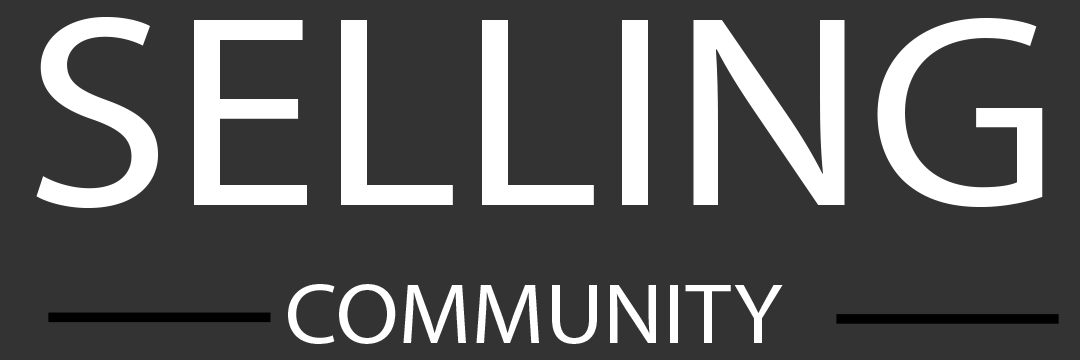
<style>
.page{position:relative;width:1080px;height:360px;background:#333333}
.page>*{position:absolute;margin:0}
.t1{font:273.8px "MyriadPro-Regular";color:#ffffff;scale:1.09 1}
.t2{font:85.7px "MyriadPro-Regular";color:#ffffff;scale:1.06 1}
</style>
<div class="page">
<p class="t1" style="left:36px;top:17px;width:1007px;height:192px">SELLING</p>
<p class="t2" style="left:288px;top:284px;width:495px;height:60px">COMMUNITY</p>
</div>
